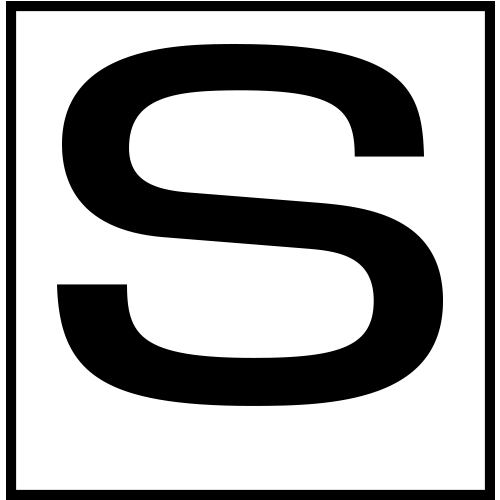
<style>
.page{position:relative;width:500px;height:500px;background:#ffffff}
.page>*{position:absolute;margin:0}
.t1{font:107.9px "ShinGoPro-Medium";color:#000000;scale:1.31 1}
</style>
<div class="page">
<p class="t1" style="left:57px;top:44px;width:386px;height:362px;text-align:center">S</p>
</div>
